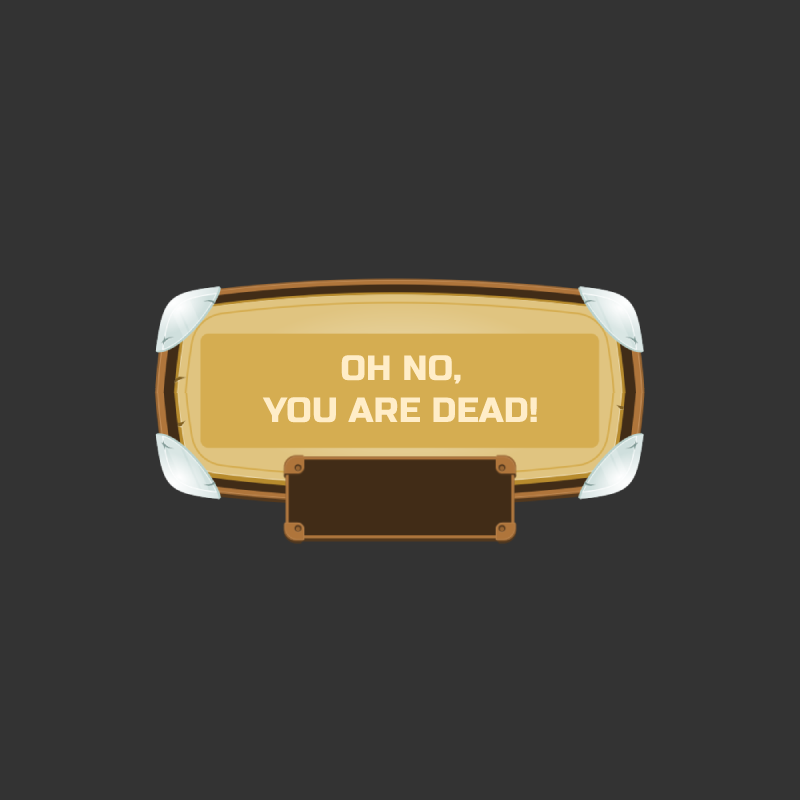
<style>
.page{position:relative;width:800px;height:800px;background:#333333}
.page>*{position:absolute;margin:0}
.t1{font:35px "RussoOne-Regular";color:#ffedc8}
</style>
<div class="page">
<p class="t1" style="left:262px;top:355px;width:275px;height:68px;text-align:center">OH NO,<br>YOU ARE DEAD!</p>
</div>
